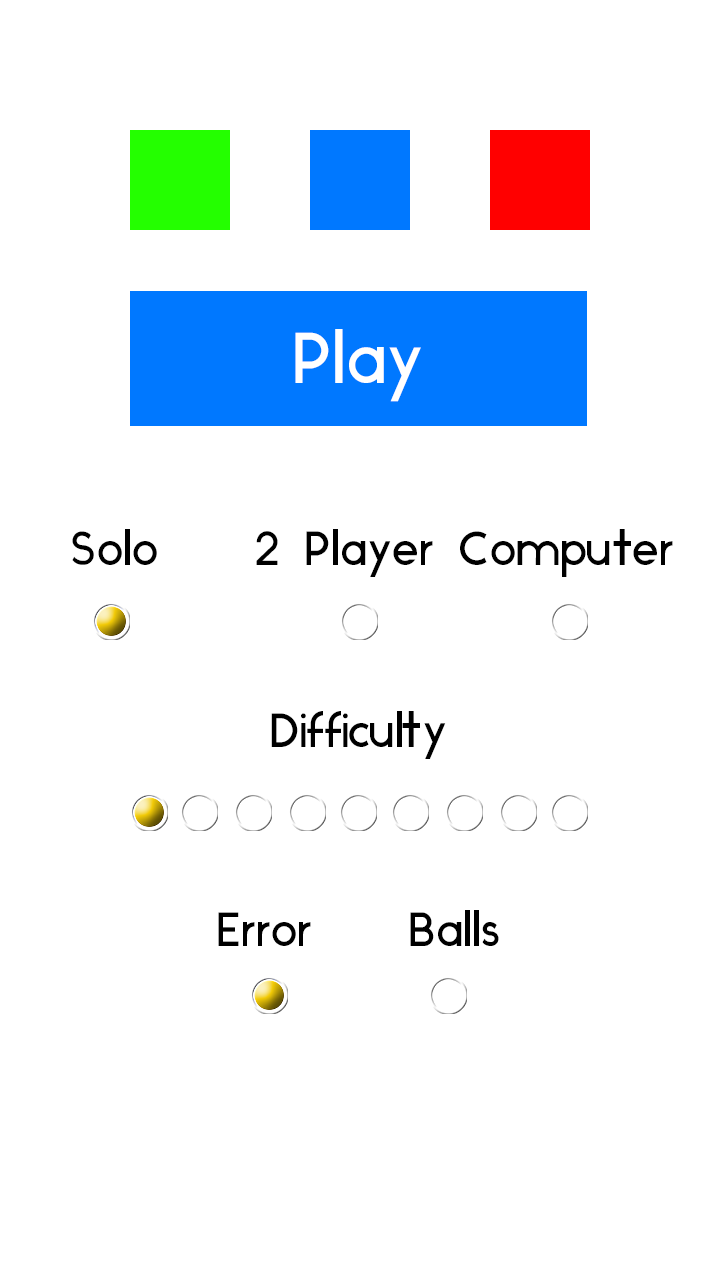
<style>
.page{position:relative;width:719px;height:1280px;background:#ffffff}
.page>*{position:absolute;margin:0}
.t1{font:72px "Ikaros";color:#ffffff}
.t2{font:48px "Ikaros";color:#000000}
</style>
<div class="page">
<p class="t1" style="left:295px;top:329px;width:126px;height:73px">Play</p>
<p class="t2" style="left:72px;top:529px;width:601px;height:48px">Solo    2 Player Computer</p>
<p class="t2" style="left:271px;top:711px;width:175px;height:48px">Difficulty</p>
<p class="t2" style="left:218px;top:910px;width:281px;height:36px">Error    Balls</p>
</div>
